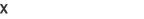
<style>
.page{position:relative;width:144px;height:19px;background:#ffffff}
.page>*{position:absolute;margin:0}
.t1{font:12px "LucidaGrande";color:#333333;font-weight:bold}
</style>
<div class="page">
<p class="t1" style="left:0px;top:4px;width:8px;height:10px">X</p>
</div>
